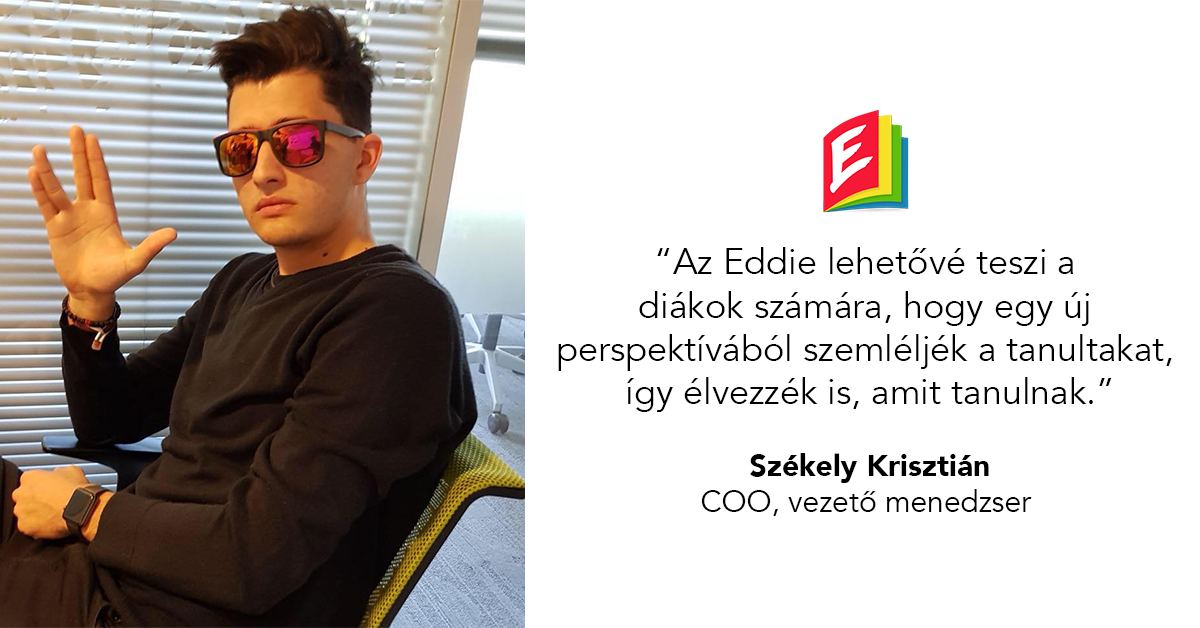
<style>
.page{position:relative;width:1200px;height:628px;background:#ffffff}
.page>*{position:absolute;margin:0}
.t1{font:36px "Avenir-Book";color:#000000}
.t2{font:30px "Avenir-Black";color:#000000}
.t3{font:30px "Avenir-Book";color:#000000}
</style>
<div class="page">
<p class="t1" style="left:558px;top:247px;width:614px;height:269px;text-align:center">“Az Eddie lehetővé teszi a <br>diákok számára, hogy egy új <br>perspektívából szemléljék a tanultakat, <br>így élvezzék is, amit tanulnak.”<br><span class="t2"><br>Székely Krisztián<br></span><span class="t3">COO, vezető menedzser</span></p>
</div>
